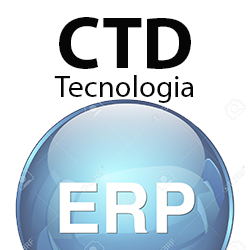
<style>
.page{position:relative;width:250px;height:250px;background:#ffffff}
.page>*{position:absolute;margin:0}
.t1{font:31px/29px "MyriadPro-Regular";color:#060606}
.t2{font:74px/29px "MyriadPro-Bold";color:#060606}
</style>
<div class="page">
<p class="t1" style="left:54px;top:17px;width:140px;height:86px;text-align:center"><span class="t2">CTD<br></span>Tecnologia</p>
</div>
